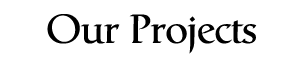
<style>
.page{position:relative;width:300px;height:60px;background:#ffffff}
.page>*{position:absolute;margin:0}
.t1{font:40px "Catull";color:#000000}
</style>
<div class="page">
<p class="t1" style="left:47px;top:14px;width:210px;height:40px">Our Projects</p>
</div>
